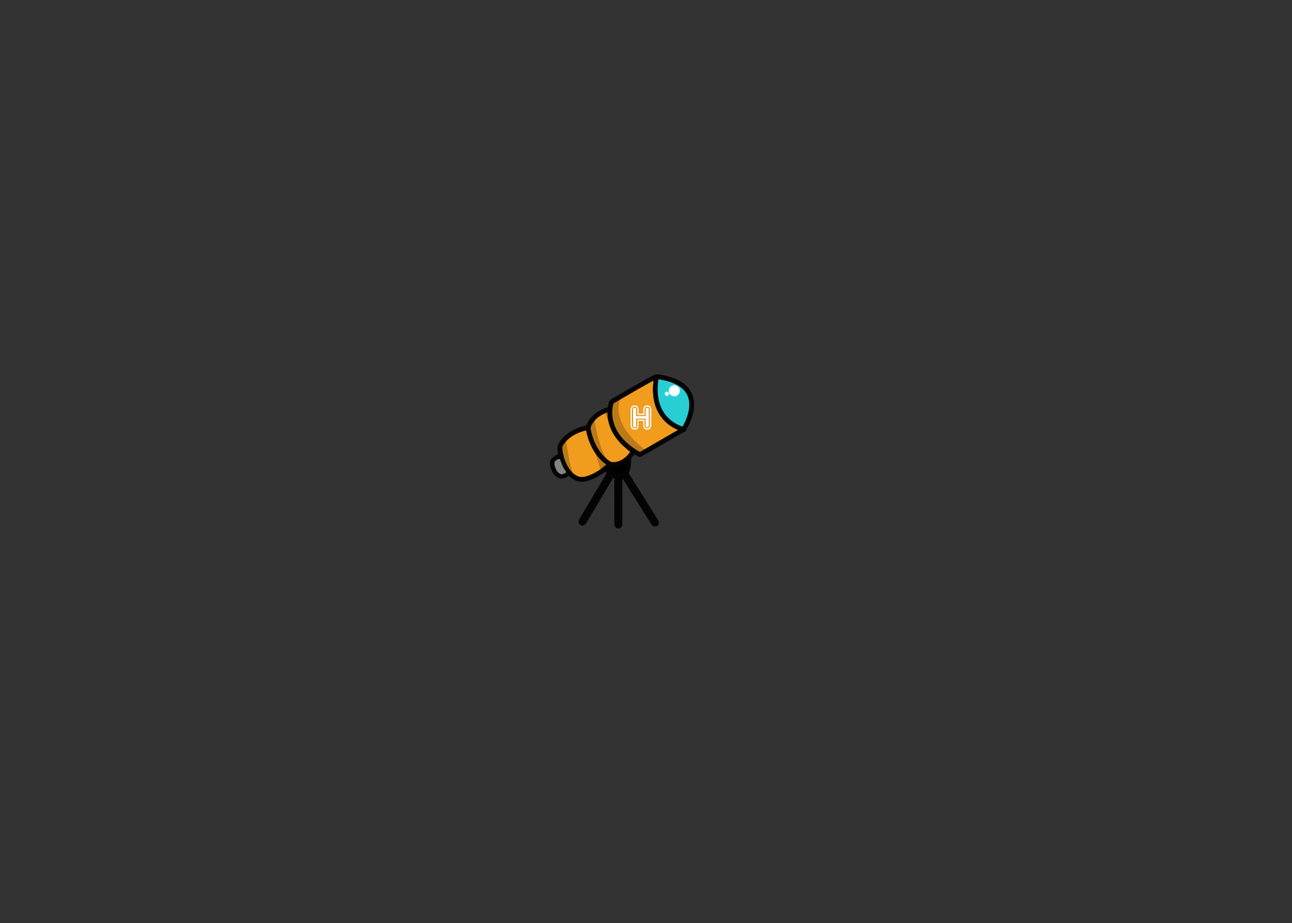
<style>
.page{position:relative;width:1292px;height:923px;background:#333333}
.page>*{position:absolute;margin:0}
.t1{font:35.9px "ARDELANEY";color:#fdfcfc}
</style>
<div class="page">
<p class="t1" style="left:631px;top:405px;width:21px;height:25px">H</p>
</div>
